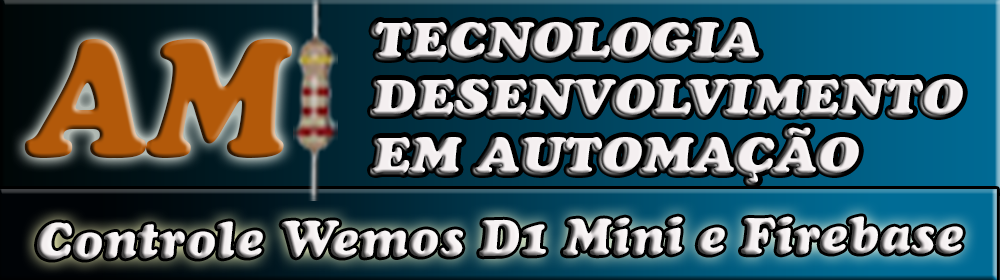
<style>
.page{position:relative;width:1000px;height:280px}
.page>*{position:absolute;margin:0}
.t1{font:48px "CooperBlackStd-Italic";color:#f4eff0;scale:1.14 1}
.t2{font:164.5px "CooperBlackStd-Italic";color:#b2590a;scale:0.93 1}
.t3{font:50.9px "CooperBlackStd-Italic"}
</style>
<div class="page">
<p class="t1" style="left:372px;top:22px;width:591px;height:161px">TECNOLOGIA<br>DESENVOLVIMENTO<br>EM AUTOMAÇÃO</p>
<p class="t2" style="left:24px;top:39px;width:268px;height:120px">AM</p>
<p class="t3" style="left:37px;top:216px;width:926px;height:44px">Controle Wemos D1 Mini e Firebase</p>
</div>
